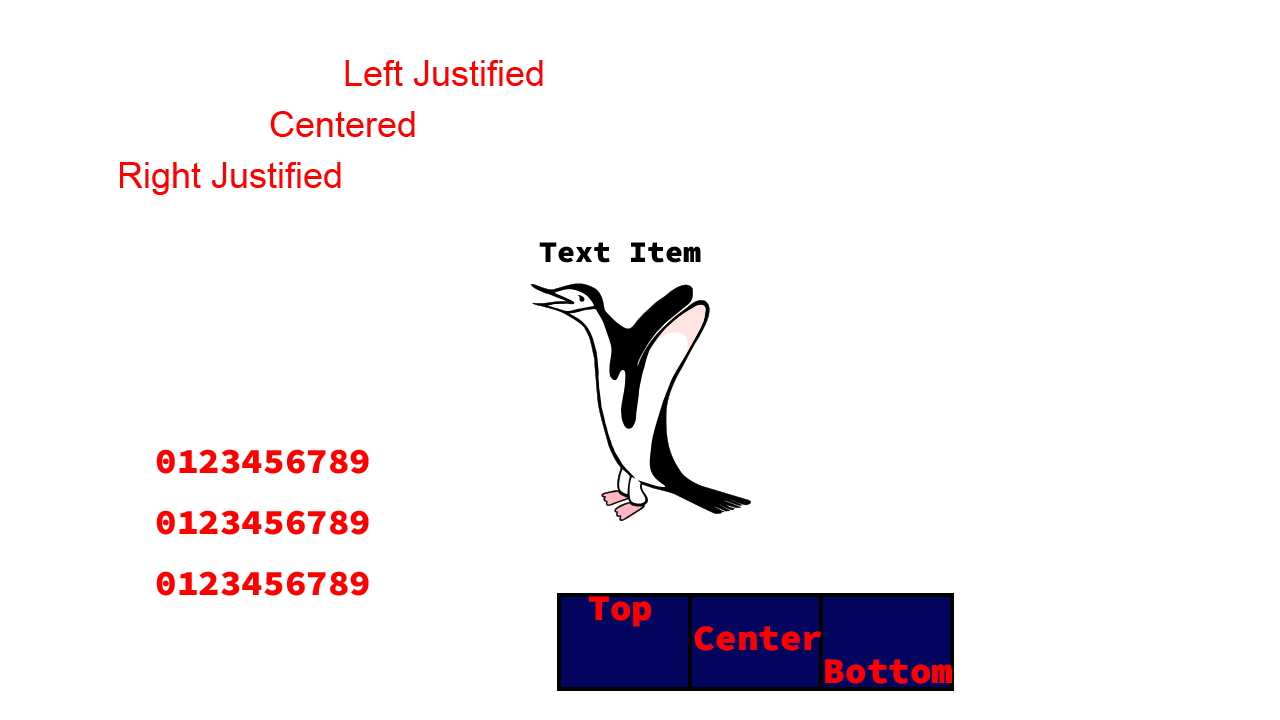
<style>
.page{position:relative;width:1280px;height:720px;background:#ffffff}
.page>*{position:absolute;margin:0}
.t1{font:36px "ArialMT";color:#ff0000}
.t2{font:30px "SourceCodePro-Black";color:#000000}
.t3{font:36px "SourceCodePro-Black";color:#ff0000}
</style>
<div class="page">
<p class="t1" style="left:345px;top:60px;width:198px;height:26px">Left Justified</p>
<p class="t1" style="left:270px;top:111px;width:145px;height:26px">Centered</p>
<p class="t1" style="left:120px;top:162px;width:221px;height:33px">Right Justified</p>
<p class="t2" style="left:539px;top:242px;width:162px;height:21px">Text Item</p>
<p class="t3" style="left:156px;top:449px;width:213px;height:25px">0123456789</p>
<p class="t3" style="left:156px;top:510px;width:213px;height:25px">0123456789</p>
<p class="t3" style="left:156px;top:571px;width:213px;height:25px">0123456789</p>
<p class="t3" style="left:589px;top:596px;width:62px;height:31px">Top</p>
<p class="t3" style="left:694px;top:626px;width:127px;height:25px">Center</p>
<p class="t3" style="left:825px;top:659px;width:127px;height:25px">Bottom</p>
</div>
